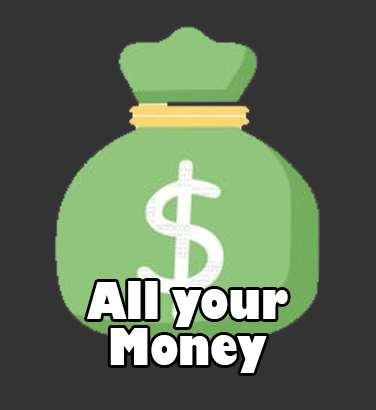
<style>
.page{position:relative;width:376px;height:410px;background:#333333}
.page>*{position:absolute;margin:0}
.t1{font:48.9px/46.5px "GillSans-UltraBold";color:#ffffff;scale:0.81 1}
</style>
<div class="page">
<p class="t1" style="left:87px;top:281px;width:201px;height:92px;text-align:center">All your<br>Money</p>
</div>
